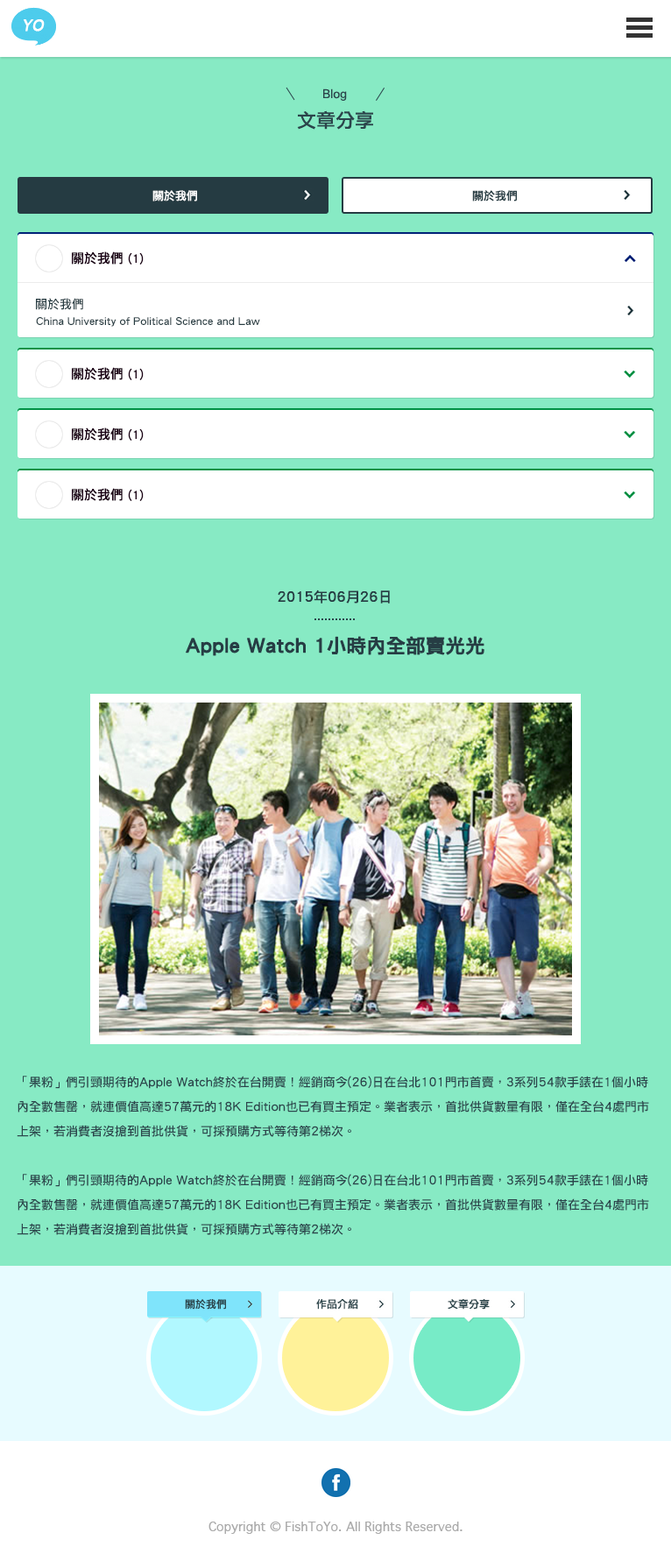
<style>
.page{position:relative;width:671px;height:1568px;background:#87eac4}
.page>*{position:absolute;margin:0}
.t1{font:12.3px "ArialMT";color:#2b444b}
.t2{font:19.3px "LiHeiPro";color:#2b444b}
.t3{font:11.4px "LiHeiPro";color:#ffffff}
.t4{font:11.4px "LiHeiPro";color:#263c43}
.t5{font:13.1px "LiHeiPro";color:#1a0014}
.t6{font:11.4px "LiHeiPro";color:#1a0014}
.t7{font:12.3px "LiHeiPro";color:#263b41}
.t8{font:10.5px "LiHeiPro";color:#263b41}
.t9{font:14px "LiHeiPro";color:#263d44}
.t10{font:19.3px "LiHeiPro";color:#263d44;font-weight:bold}
.t11{font:12.3px/24.5px "LiHeiPro";color:#2b444b}
</style>
<div class="page">
<p class="t1" style="left:323px;top:88px;width:24px;height:13px">Blog</p>
<p class="t2" style="left:297px;top:110px;width:76px;height:20px">文章分享</p>
<p class="t3" style="left:152px;top:190px;width:45px;height:11px">關於我們</p>
<p class="t4" style="left:472px;top:190px;width:45px;height:11px">關於我們</p>
<p class="t5" style="left:72px;top:251px;width:51px;height:14px">關於我們</p>
<p class="t6" style="left:128px;top:252px;width:16px;height:13px">(1)</p>
<p class="t7" style="left:36px;top:298px;width:47px;height:12px">關於我們</p>
<p class="t8" style="left:36px;top:317px;width:224px;height:10px">China University of Political Science and Law</p>
<p class="t5" style="left:72px;top:367px;width:51px;height:13px">關於我們</p>
<p class="t6" style="left:128px;top:368px;width:16px;height:12px">(1)</p>
<p class="t9" style="left:278px;top:590px;width:112px;height:14px">2015年06月26日</p>
<p class="t10" style="left:186px;top:636px;width:298px;height:20px">Apple Watch 1小時內全部賣光光</p>
<p class="t11" style="left:17px;top:1076px;width:632px;height:159px">「果粉」們引頸期待的Apple Watch終於在台開賣！經銷商今(26)日在台北101門市首賣，3系列54款手錶在1個小時內全數售罄，就連價值高達57萬元的18K Edition也已有買主預定。業者表示，首批供貨數量有限，僅在全台4處門市上架，若消費者沒搶到首批供貨，可採預購方式等待第2梯次。<br><br>「果粉」們引頸期待的Apple Watch終於在台開賣！經銷商今(26)日在台北101門市首賣，3系列54款手錶在1個小時內全數售罄，就連價值高達57萬元的18K Edition也已有買主預定。業者表示，首批供貨數量有限，僅在全台4處門市上架，若消費者沒搶到首批供貨，可採預購方式等待第2梯次。</p>
</div>
